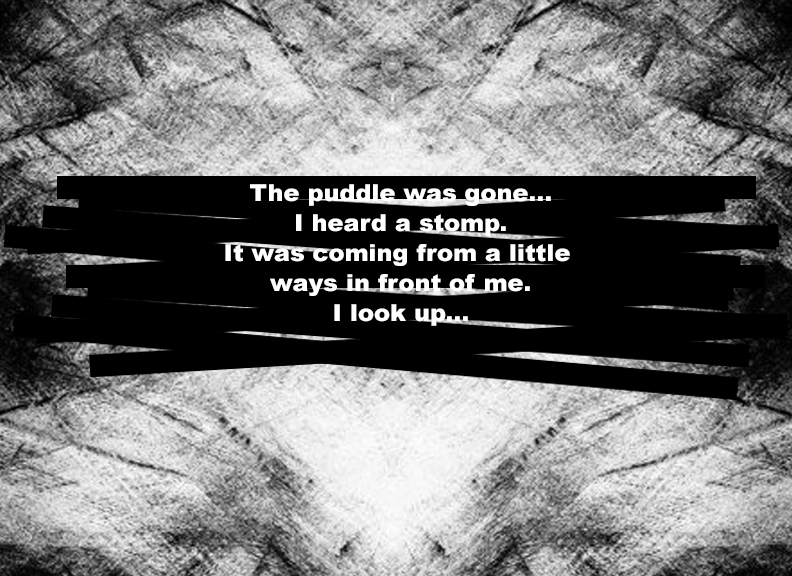
<style>
.page{position:relative;width:792px;height:576px;background:#000000}
.page>*{position:absolute;margin:0}
.t1{font:23.5px/30px "Arial-Black";color:#ffffff}
</style>
<div class="page">
<p class="t1" style="left:225px;top:184px;width:345px;height:142px;text-align:center">The puddle was gone...<br>I heard a stomp.<br>It was coming from a little <br>ways in front of me.<br>I look up...</p>
</div>
